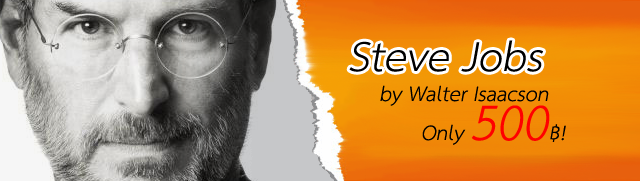
<style>
.page{position:relative;width:640px;height:181px}
.page>*{position:absolute;margin:0}
.t1{font:60px "THSarabunPSK";color:#000000;font-style:italic}
.t2{font:30px "THSarabunPSK";color:#000000;font-style:italic}
.t3{font:72px "THSarabunPSK";color:#ff0000;font-style:italic}
</style>
<div class="page">
<p class="t1" style="left:349px;top:40px;width:194px;height:32px">Steve Jobs</p>
<p class="t2" style="left:380px;top:85px;width:169px;height:21px">by Walter Isaacson</p>
<p class="t2" style="left:422px;top:105px;width:144px;height:40px">Only <span class="t3">500</span>฿!</p>
</div>
